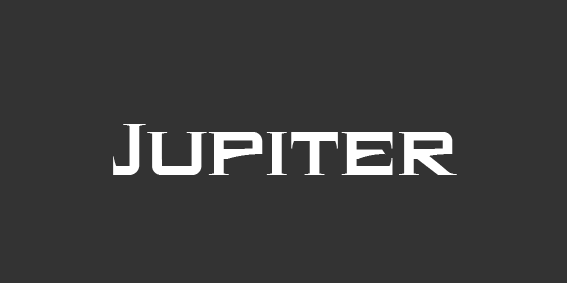
<style>
.page{position:relative;width:567px;height:283px;background:#333333}
.page>*{position:absolute;margin:0}
.t1{font:100px "BlackHoleBB";color:#ffffff}
</style>
<div class="page">
<p class="t1" style="left:113px;top:124px;width:344px;height:51px">Jupiter</p>
</div>
